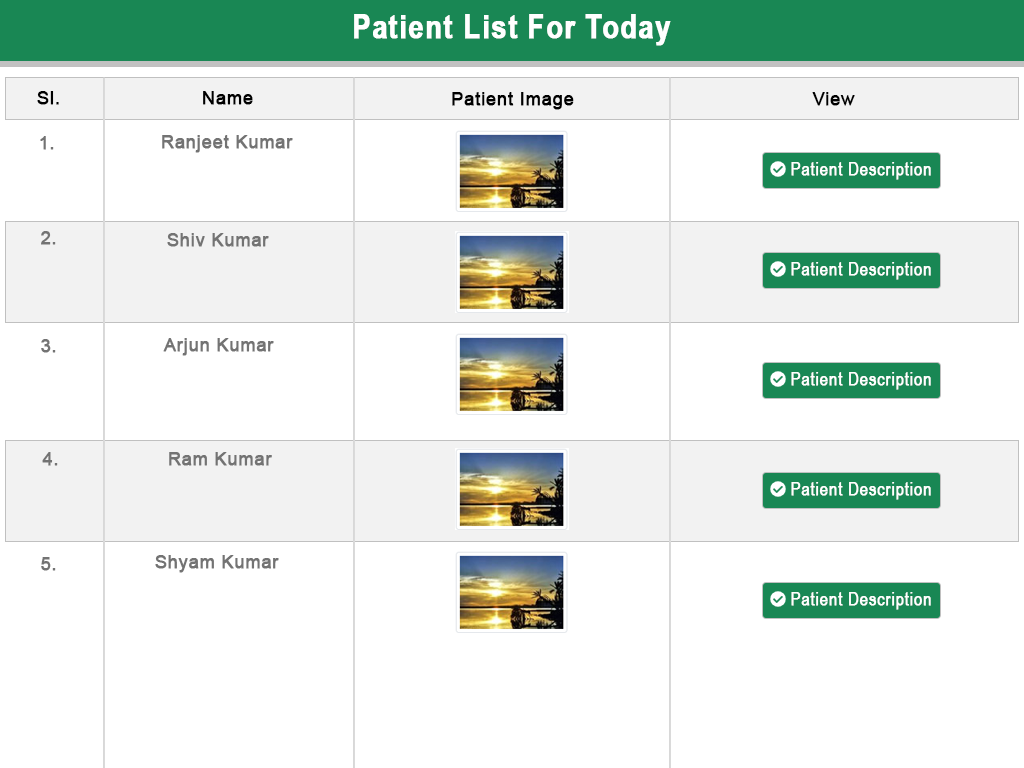
<style>
.page{position:relative;width:1024px;height:768px;background:#ffffff}
.page>*{position:absolute;margin:0}
.t1{font:33px "ArialNarrow-Bold";letter-spacing:0.025em;color:#ffffff;font-weight:bold}
.t2{font:18px "ArialMT";letter-spacing:0.025em;color:#000000;font-weight:bold}
.t3{font:18px "ArialMT";letter-spacing:0.025em;color:#737373;font-weight:bold}
.t4{font:18px "ArialNarrow";letter-spacing:0.025em;color:#ffffff;font-weight:bold}
</style>
<div class="page">
<p class="t1" style="left:354px;top:14px;width:317px;height:32px">Patient List For Today</p>
<p class="t2" style="left:37px;top:91px;width:22px;height:14px">Sl.</p>
<p class="t2" style="left:203px;top:91px;width:50px;height:14px">Name</p>
<p class="t2" style="left:452px;top:92px;width:122px;height:18px">Patient Image</p>
<p class="t2" style="left:812px;top:92px;width:43px;height:14px">View</p>
<p class="t3" style="left:40px;top:136px;width:14px;height:14px">1.</p>
<p class="t3" style="left:162px;top:135px;width:131px;height:18px">Ranjeet Kumar</p>
<p class="t4" style="left:791px;top:162px;width:140px;height:18px">Patient Description</p>
<p class="t3" style="left:41px;top:231px;width:15px;height:14px">2.</p>
<p class="t3" style="left:167px;top:233px;width:102px;height:14px">Shiv Kumar</p>
<p class="t4" style="left:791px;top:262px;width:140px;height:18px">Patient Description</p>
<p class="t3" style="left:41px;top:339px;width:15px;height:14px">3.</p>
<p class="t3" style="left:163px;top:338px;width:111px;height:18px">Arjun Kumar</p>
<p class="t4" style="left:791px;top:372px;width:140px;height:18px">Patient Description</p>
<p class="t3" style="left:42px;top:452px;width:16px;height:14px">4.</p>
<p class="t3" style="left:169px;top:452px;width:103px;height:14px">Ram Kumar</p>
<p class="t4" style="left:791px;top:482px;width:140px;height:18px">Patient Description</p>
<p class="t3" style="left:41px;top:557px;width:15px;height:14px">5.</p>
<p class="t3" style="left:155px;top:555px;width:124px;height:18px">Shyam Kumar</p>
<p class="t4" style="left:791px;top:592px;width:140px;height:18px">Patient Description</p>
</div>
